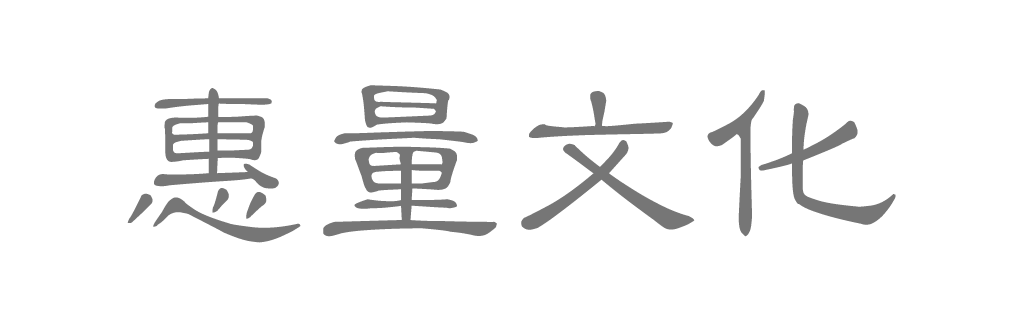
<style>
.page{position:relative;width:1024px;height:327px;background:#ffffff}
.page>*{position:absolute;margin:0}
.t1{font:196.5px "CloudLiBianGBK";color:#767676}
</style>
<div class="page">
<p class="t1" style="left:127px;top:85px;width:769px;height:158px">惠量文化</p>
</div>
